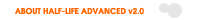
<style>
.page{position:relative;width:200px;height:20px;background:#ffffff}
.page>*{position:absolute;margin:0}
.t1{font:8px "Atlanta-Demi";color:#ff6600}
</style>
<div class="page">
<p class="t1" style="left:15px;top:7px;width:129px;height:8px">ABOUT HALF-LIFE ADVANCED v2.0</p>
</div>
